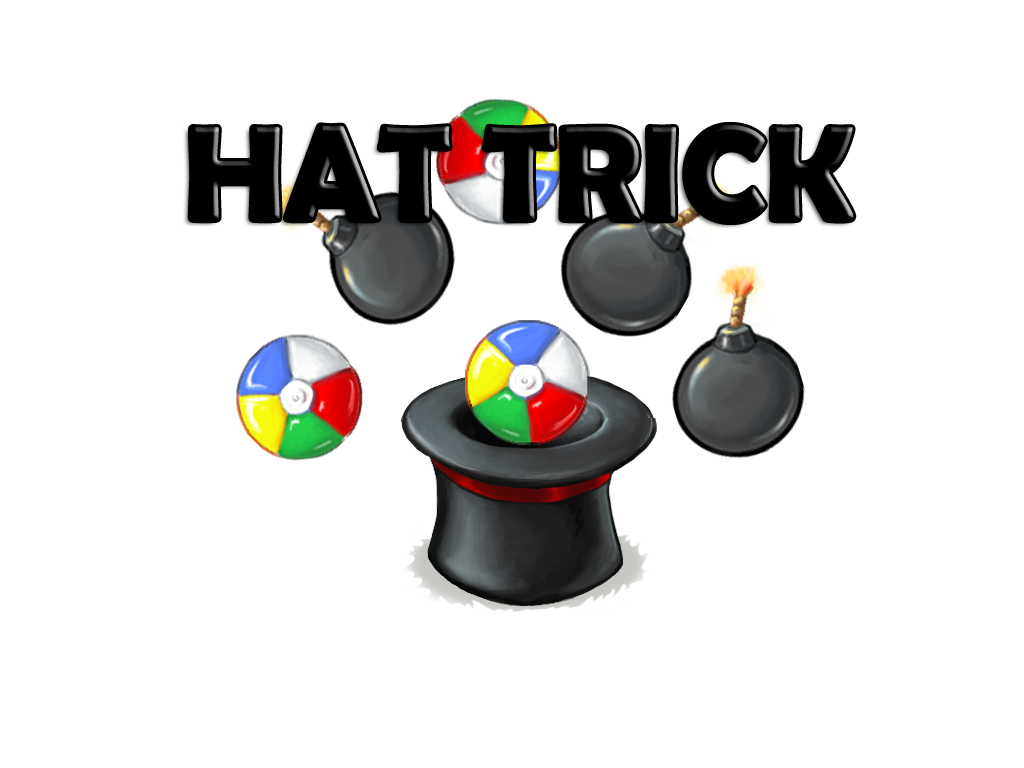
<style>
.page{position:relative;width:1024px;height:768px;background:#ffffff}
.page>*{position:absolute;margin:0}
.t1{font:135px "BerlinSansFBDemi-Bold";color:#010000}
</style>
<div class="page">
<p class="t1" style="left:190px;top:125px;width:664px;height:97px">HAT TRICK</p>
</div>
